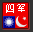
<style>
.page{position:relative;width:33px;height:32px;background:#333333}
.page>*{position:absolute;margin:0}
.t1{font:10.4px "SimSun";color:#ffffff}
</style>
<div class="page">
<p class="t1" style="left:6px;top:4px;width:19px;height:9px">四军</p>
</div>
